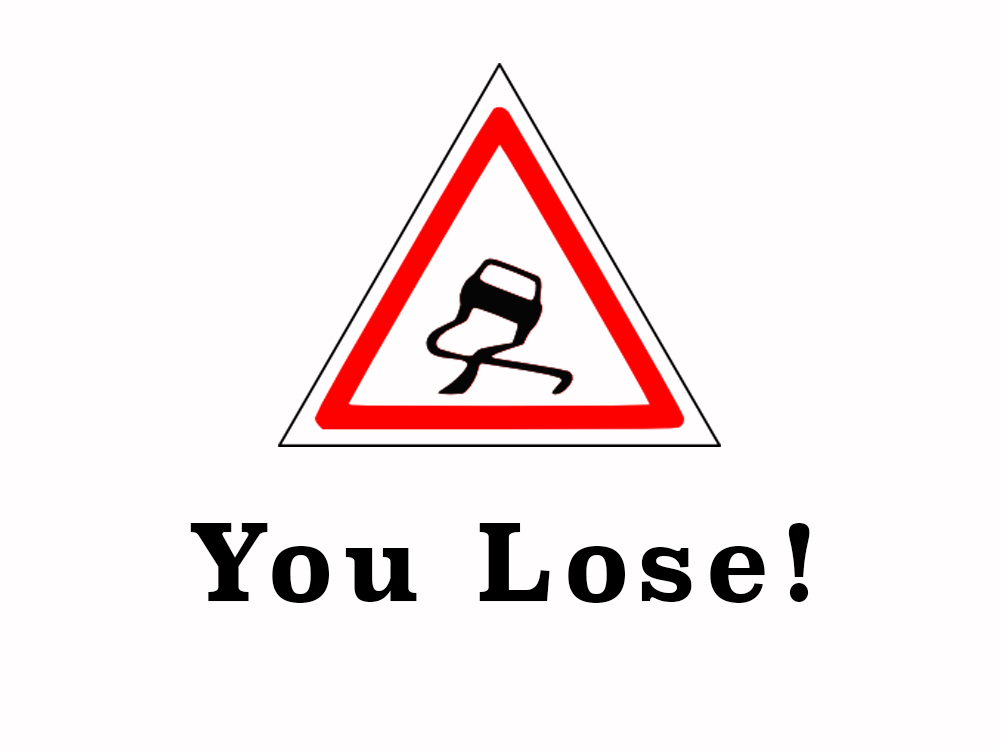
<style>
.page{position:relative;width:1000px;height:750px;background:#fffdfe}
.page>*{position:absolute;margin:0}
.t1{font:103.7px "Superclarendon-Bold";letter-spacing:0.1em;color:#000000;scale:0.97 1}
</style>
<div class="page">
<p class="t1" style="left:190px;top:523px;width:620px;height:80px">You Lose!</p>
</div>
